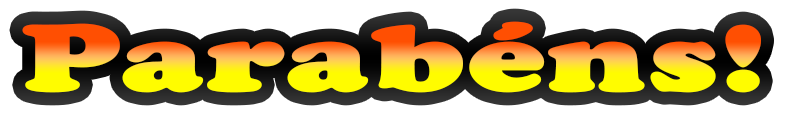
<style>
.page{position:relative;width:800px;height:124px;background:#ffffff}
.page>*{position:absolute;margin:0}
.t1{font:96px "CooperBlack";font-weight:bold;scale:1.5 1}
</style>
<div class="page">
<p class="t1" style="left:22px;top:21px;width:739px;height:72px">Parabéns!</p>
</div>
